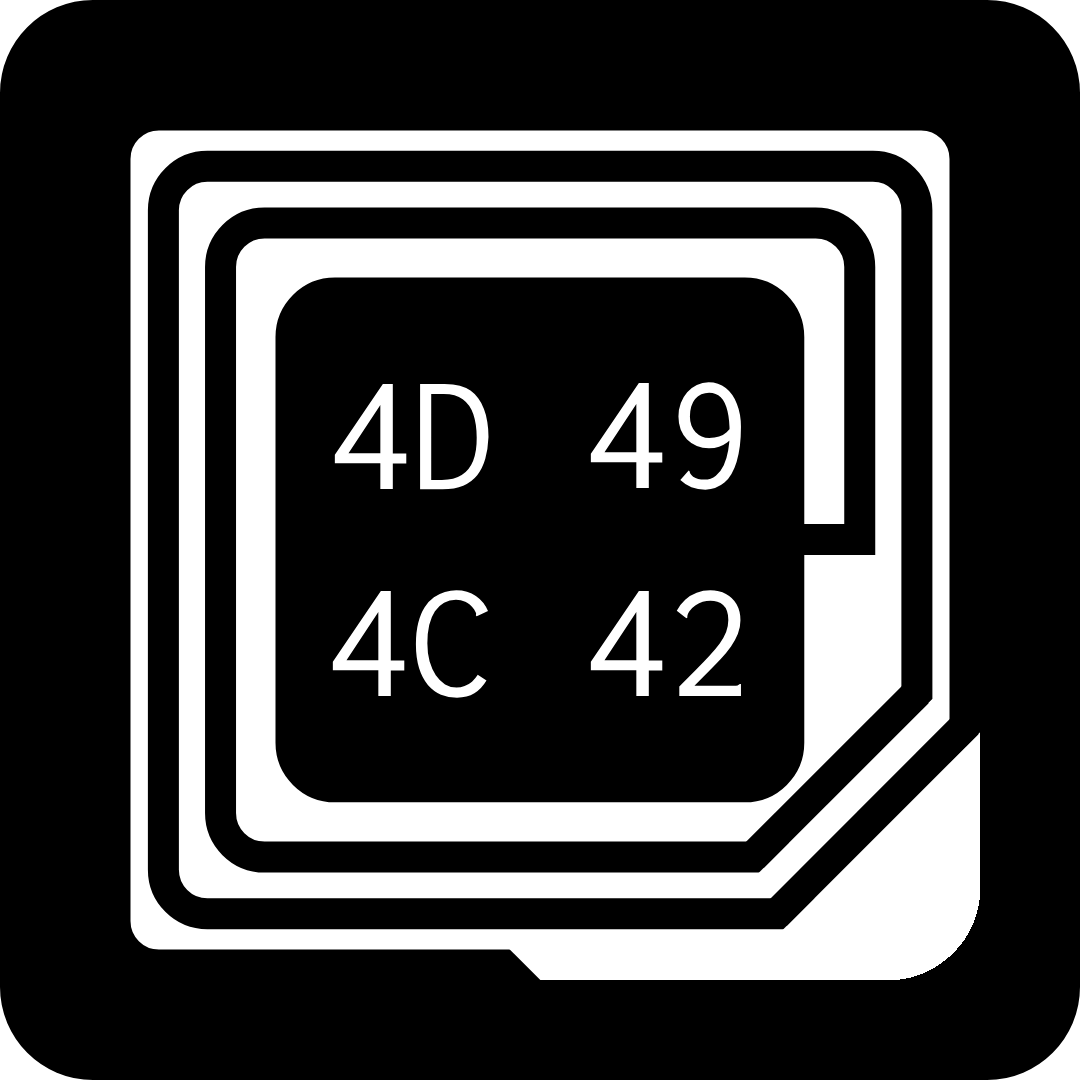
<style>
.page{position:relative;width:1080px;height:1080px;background:#000000}
.page>*{position:absolute;margin:0}
.t1{font:168.5px "Inconsolata-Regular";color:#ffffff}
</style>
<div class="page">
<p class="t1" style="left:334px;top:383px;width:155px;height:107px">4D</p>
<p class="t1" style="left:590px;top:382px;width:151px;height:108px">49</p>
<p class="t1" style="left:332px;top:590px;width:157px;height:108px">4C</p>
<p class="t1" style="left:590px;top:590px;width:151px;height:106px">42</p>
</div>
